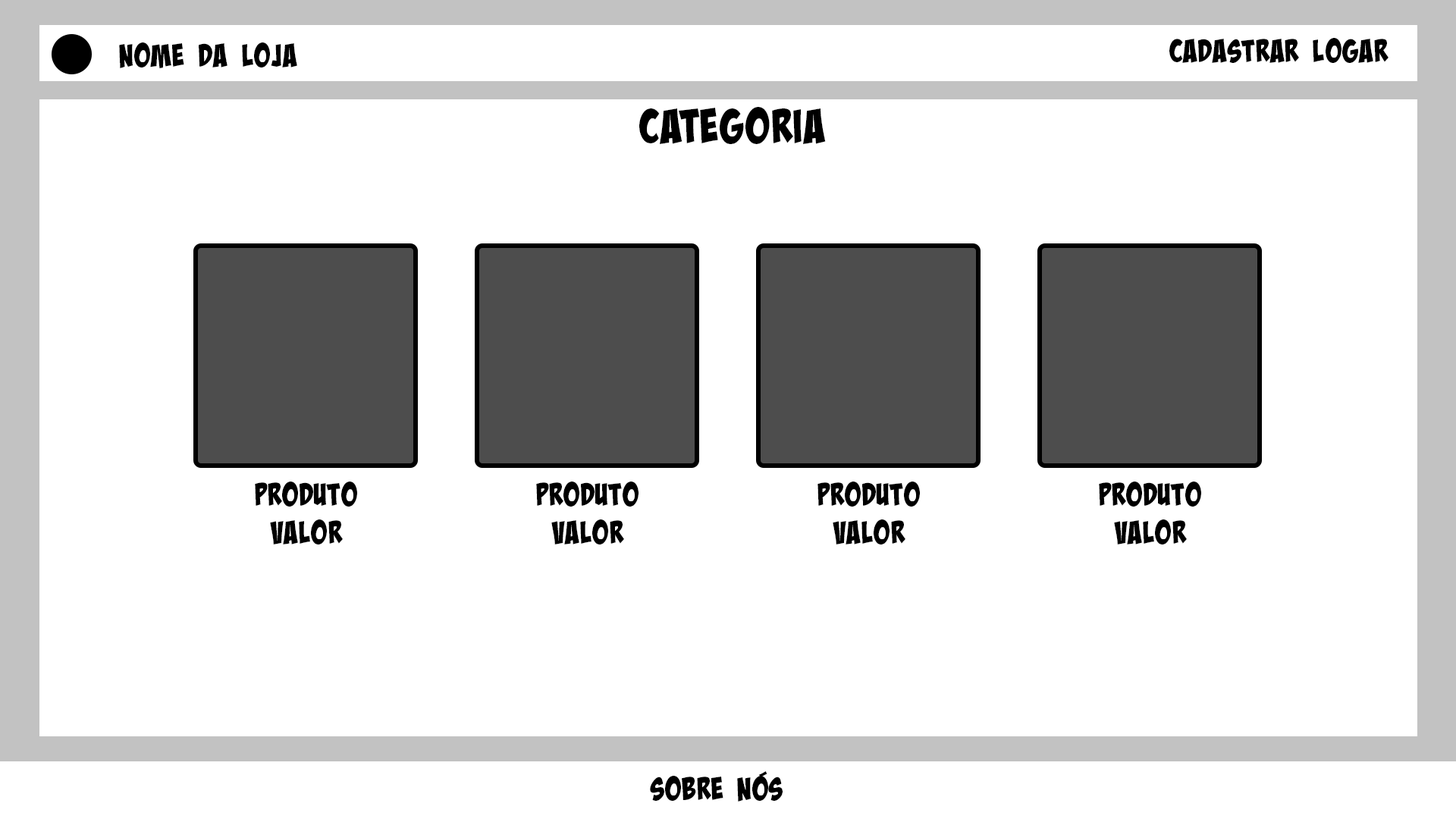
<style>
.page{position:relative;width:1456px;height:819px;background:#ffffff}
.page>*{position:absolute;margin:0}
.t1{font:31.6px "BadaBoomProBB";color:#000000}
.t2{font:47.4px "BadaBoomProBB";color:#000000}
</style>
<div class="page">
<p class="t1" style="left:1169px;top:38px;width:219px;height:25px">Cadastrar Logar</p>
<p class="t1" style="left:119px;top:42px;width:178px;height:26px">NOME DA LOJA</p>
<p class="t2" style="left:639px;top:107px;width:187px;height:37px">CATEGORIA</p>
<p class="t1" style="left:255px;top:482px;width:102px;height:62px;text-align:center">Produto<br>Valor</p>
<p class="t1" style="left:536px;top:482px;width:103px;height:62px;text-align:center">Produto<br>Valor</p>
<p class="t1" style="left:817px;top:482px;width:103px;height:62px;text-align:center">Produto<br>Valor</p>
<p class="t1" style="left:1099px;top:482px;width:102px;height:62px;text-align:center">Produto<br>Valor</p>
<p class="t1" style="left:650px;top:771px;width:133px;height:31px">Sobre nós</p>
</div>
